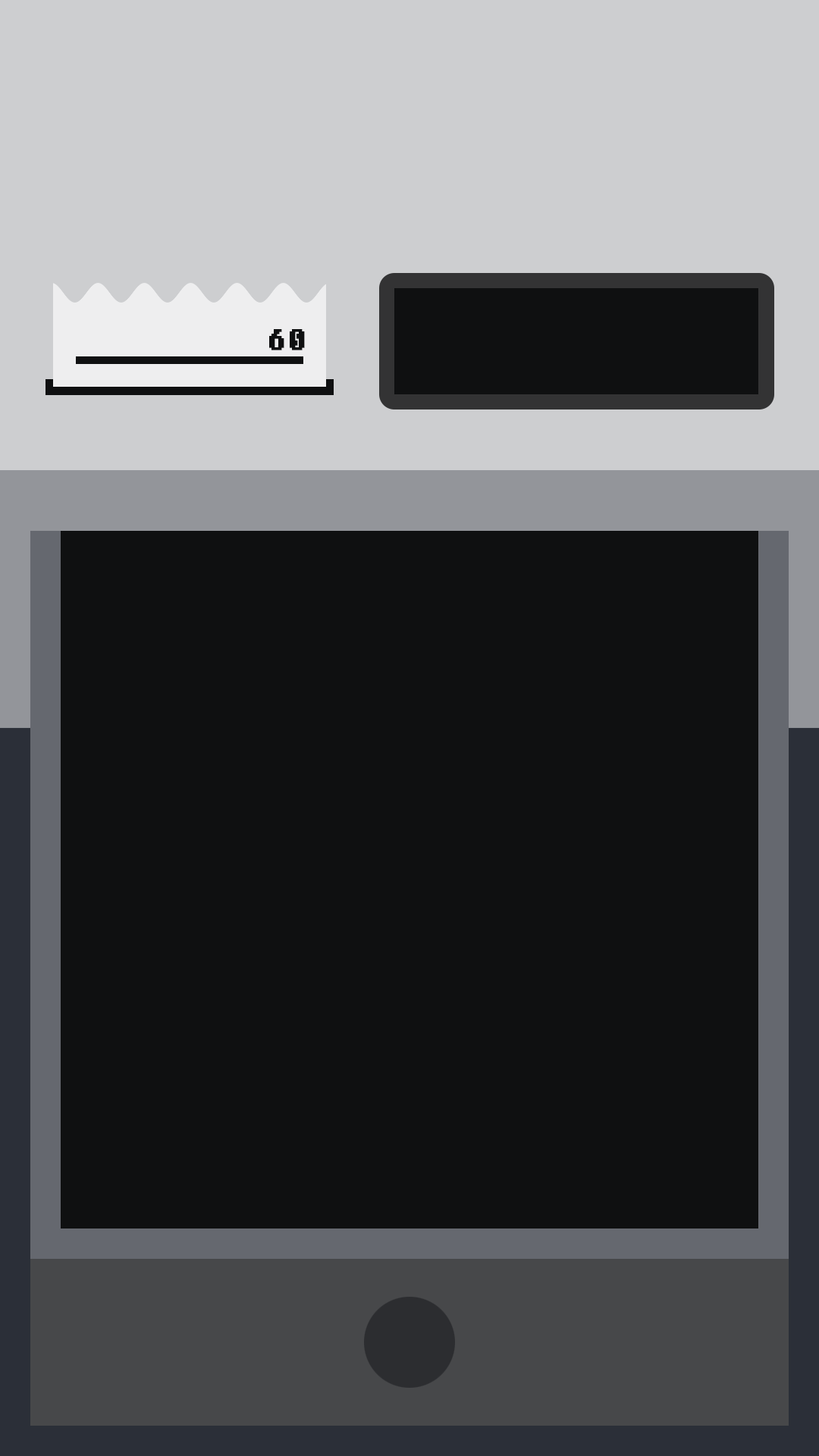
<style>
.page{position:relative;width:819px;height:1456px;background:#0f1011}
.page>*{position:absolute;margin:0}
.t1{font:36.4px "Fixedsys";color:#0f1011;font-weight:bold}
</style>
<div class="page">
<p class="t1" style="left:269px;top:329px;width:36px;height:21px">60</p>
</div>
